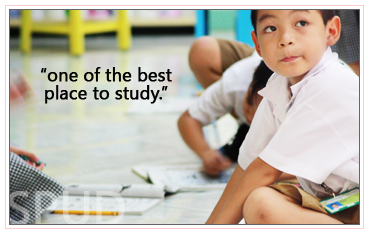
<style>
.page{position:relative;width:370px;height:235px}
.page>*{position:absolute;margin:0}
.t1{font:18px/18px "SegoeUI";letter-spacing:-0.01em;color:#020202;font-weight:bold}
</style>
<div class="page">
<p class="t1" style="left:41px;top:67px;width:131px;height:37px;text-align:center">“one of the best<br>place to study.”</p>
</div>
